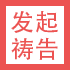
<style>
.page{position:relative;width:70px;height:70px;background:#ffffff}
.page>*{position:absolute;margin:0}
.t1{font:24px/27px "AdobeHeitiStd-Regular";color:#ec5351}
</style>
<div class="page">
<p class="t1" style="left:11px;top:11px;width:47px;height:49px">发起<br>祷告</p>
</div>
